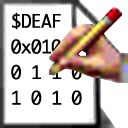
<style>
.page{position:relative;width:128px;height:128px;background:#ffffff}
.page>*{position:absolute;margin:0}
.t1{font:18px/25.6px "Monaco";letter-spacing:-0.05em;color:#000000}
</style>
<div class="page">
<p class="t1" style="left:11px;top:12px;width:71px;height:93px">$DEAF<br>0x0100<br>0 1 1 0<br>1 0 1 0</p>
</div>
